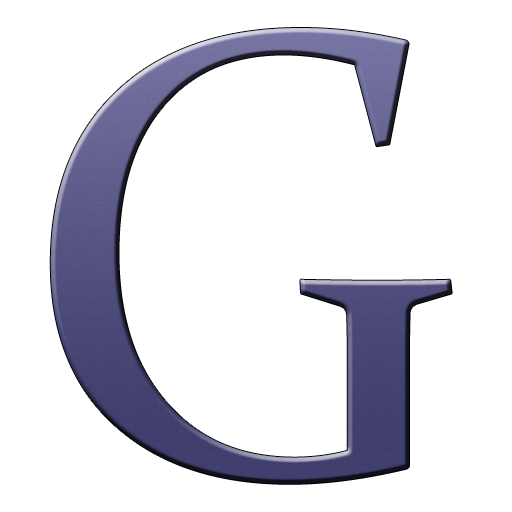
<style>
.page{position:relative;width:512px;height:512px;background:#ffffff}
.page>*{position:absolute;margin:0}
.t1{font:639px "Constantia";letter-spacing:0.374em}
</style>
<div class="page">
<p class="t1" style="left:50px;top:28px;width:402px;height:456px">G</p>
</div>
